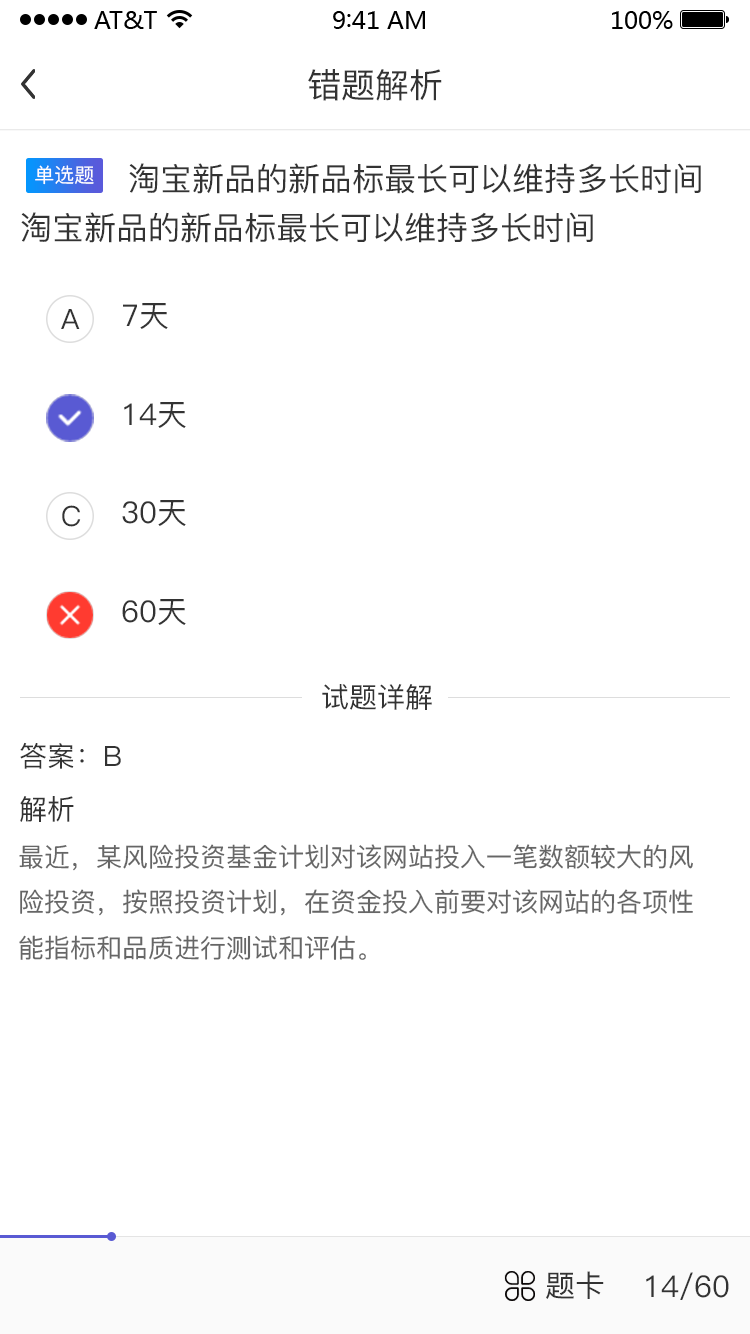
<style>
.page{position:relative;width:750px;height:1334px;background:#ffffff}
.page>*{position:absolute;margin:0}
.t1{font:34px "PingFang-SC-Medium";color:#333333}
.t2{font:20px "PingFang-SC-Medium";color:#ffffff}
.t3{font:32px "PingFang-SC-Medium";color:#333333}
.t4{font:30px "PingFang-SC-Medium";color:#333333}
.t5{font:28px "PingFang-SC-Medium";color:#333333}
.t6{font:26px "PingFang-SC-Medium";color:#666666}
</style>
<div class="page">
<p class="t1" style="left:308px;top:69px;width:134px;height:32px">错题解析</p>
<p class="t2" style="left:35px;top:165px;width:59px;height:20px">单选题</p>
<p class="t3" style="left:129px;top:163px;width:572px;height:31px">淘宝新品的新品标最长可以维持多长时间</p>
<p class="t3" style="left:21px;top:212px;width:572px;height:31px">淘宝新品的新品标最长可以维持多长时间</p>
<p class="t4" style="left:123px;top:303px;width:45px;height:26px">7天</p>
<p class="t5" style="left:61px;top:309px;width:19px;height:20px">A</p>
<p class="t4" style="left:124px;top:402px;width:62px;height:26px">14天</p>
<p class="t5" style="left:62px;top:505px;width:19px;height:22px">C</p>
<p class="t4" style="left:122px;top:500px;width:64px;height:26px">30天</p>
<p class="t4" style="left:122px;top:599px;width:64px;height:26px">60天</p>
<p class="t5" style="left:322px;top:684px;width:110px;height:26px">试题详解</p>
<p class="t5" style="left:20px;top:742px;width:101px;height:27px">答案：B</p>
<p class="t5" style="left:20px;top:796px;width:54px;height:26px">解析</p>
<p class="t6" style="left:19px;top:844px;width:674px;height:116px">最近，某风险投资基金计划对该网站投入一笔数额较大的风险投资，按照投资计划，在资金投入前要对该网站的各项性能指标和品质进行测试和评估。</p>
<p class="t4" style="left:546px;top:1271px;width:58px;height:28px">题卡</p>
<p class="t4" style="left:646px;top:1272px;width:83px;height:28px">14/60</p>
</div>
